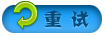
<style>
.page{position:relative;width:106px;height:36px;background:#ffffff}
.page>*{position:absolute;margin:0}
.t1{font:18px "JJianzi";color:#064c7d}
</style>
<div class="page">
<p class="t1" style="left:44px;top:10px;width:45px;height:18px">重  试</p>
</div>
